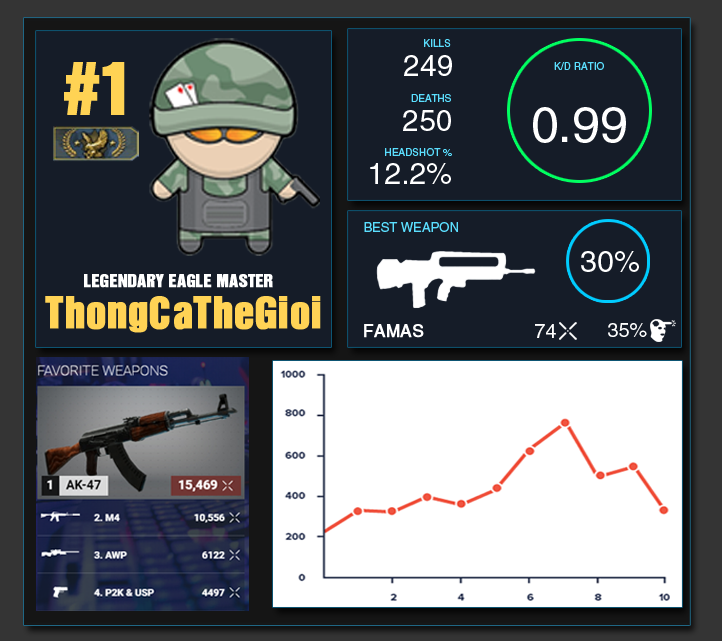
<style>
.page{position:relative;width:722px;height:641px;background:#151c28}
.page>*{position:absolute;margin:0}
.t1{font:10px "HelveticaLTStd-Roman";color:#5bdfff}
.t2{font:66.7px "HelveticaInseratLTStd-Roman";color:#ffd354;font-weight:bold}
.t3{font:30px "HelveticaLTStd-Roman";color:#ffffff}
.t4{font:50px "HelveticaLTStd-Roman";color:#ffffff}
.t5{font:13px "HelveticaLTStd-Roman";color:#5bdfff}
.t6{font:16px "HelveticaInseratLTStd-Roman";color:#ffffff;font-weight:bold}
.t7{font:40px "HelveticaInseratLTStd-Roman";color:#ffd355;font-weight:bold}
.t8{font:17px "HelveticaLTStd-Roman";color:#ffffff;font-weight:bold}
.t9{font:20px "HelveticaLTStd-Roman";color:#ffffff}
</style>
<div class="page">
<p class="t1" style="left:424px;top:39px;width:27px;height:8px">KILLS</p>
<p class="t2" style="left:64px;top:62px;width:61px;height:53px">#1</p>
<p class="t3" style="left:404px;top:55px;width:48px;height:21px">249</p>
<p class="t1" style="left:554px;top:62px;width:50px;height:8px">K/D RATIO</p>
<p class="t1" style="left:411px;top:94px;width:40px;height:8px">DEATHS</p>
<p class="t3" style="left:403px;top:110px;width:48px;height:21px">250</p>
<p class="t4" style="left:533px;top:107px;width:93px;height:36px">0.99</p>
<p class="t1" style="left:385px;top:148px;width:67px;height:8px">HEADSHOT %</p>
<p class="t3" style="left:370px;top:163px;width:81px;height:21px">12.2%</p>
<p class="t5" style="left:364px;top:222px;width:94px;height:10px">BEST WEAPON</p>
<p class="t3" style="left:581px;top:251px;width:58px;height:21px">30%</p>
<p class="t6" style="left:84px;top:274px;width:189px;height:14px">LEGENDARY EAGLE MASTER</p>
<p class="t7" style="left:45px;top:296px;width:276px;height:37px">ThongCaTheGioi</p>
<p class="t8" style="left:364px;top:324px;width:60px;height:14px">FAMAS</p>
<p class="t9" style="left:535px;top:324px;width:21px;height:14px">74</p>
<p class="t9" style="left:608px;top:323px;width:39px;height:14px">35%</p>
</div>
